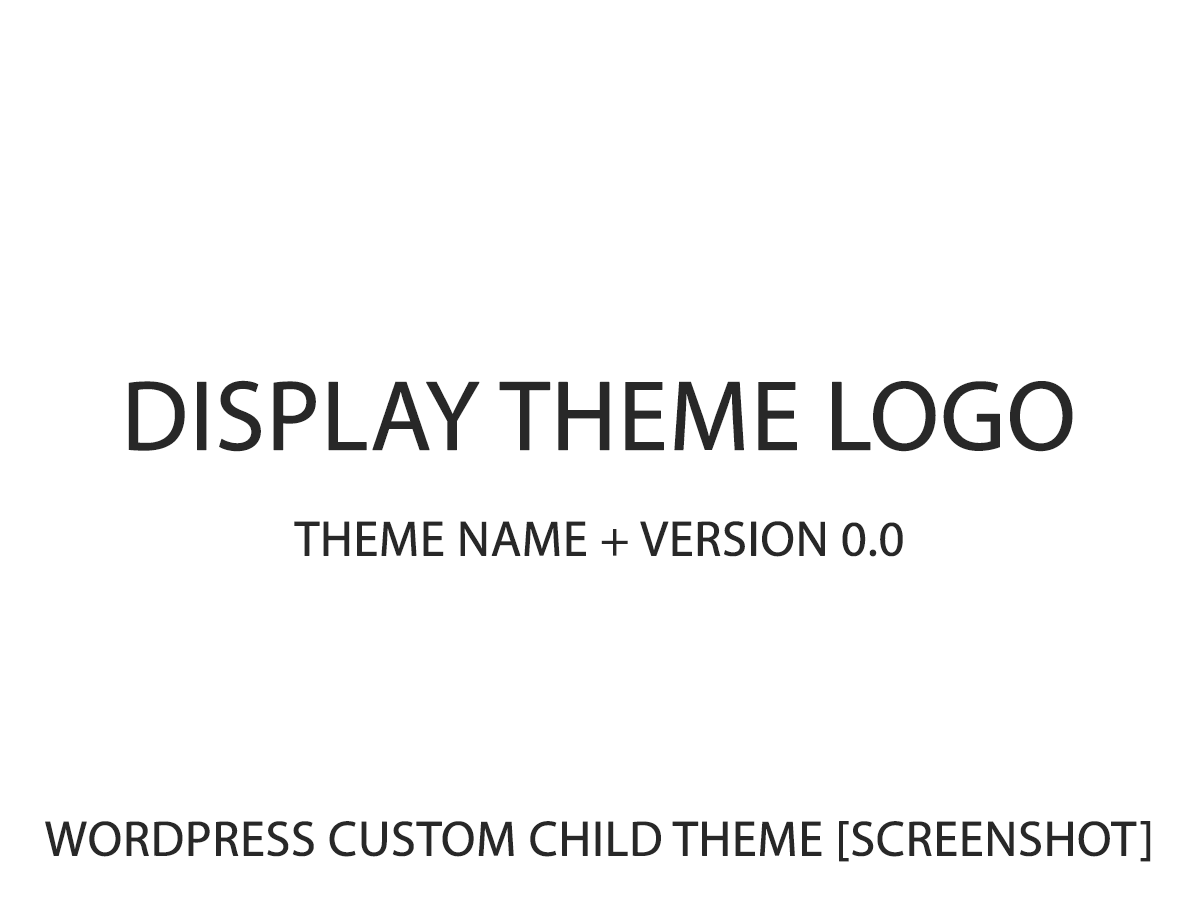
<style>
.page{position:relative;width:1200px;height:900px;background:#ffffff}
.page>*{position:absolute;margin:0}
.t1{font:100px "MyriadPro-Regular";letter-spacing:-0.01em;color:#282828;font-weight:bold}
.t2{font:50px "MyriadPro-Regular";letter-spacing:-0.01em;color:#282828;font-weight:bold}
</style>
<div class="page">
<p class="t1" style="left:128px;top:380px;width:945px;height:72px">DISPLAY THEME LOGO</p>
<p class="t2" style="left:294px;top:521px;width:609px;height:36px">THEME NAME + VERSION 0.0</p>
<p class="t2" style="left:45px;top:821px;width:1106px;height:41px">WORDPRESS CUSTOM CHILD THEME [SCREENSHOT]</p>
</div>
